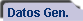
<style>
.page{position:relative;width:83px;height:21px;background:#c7c5dd}
.page>*{position:absolute;margin:0}
.t1{font:12px "Arial-BoldMT";color:#093272}
</style>
<div class="page">
<p class="t1" style="left:8px;top:8px;width:60px;height:9px">Datos Gen.</p>
</div>
